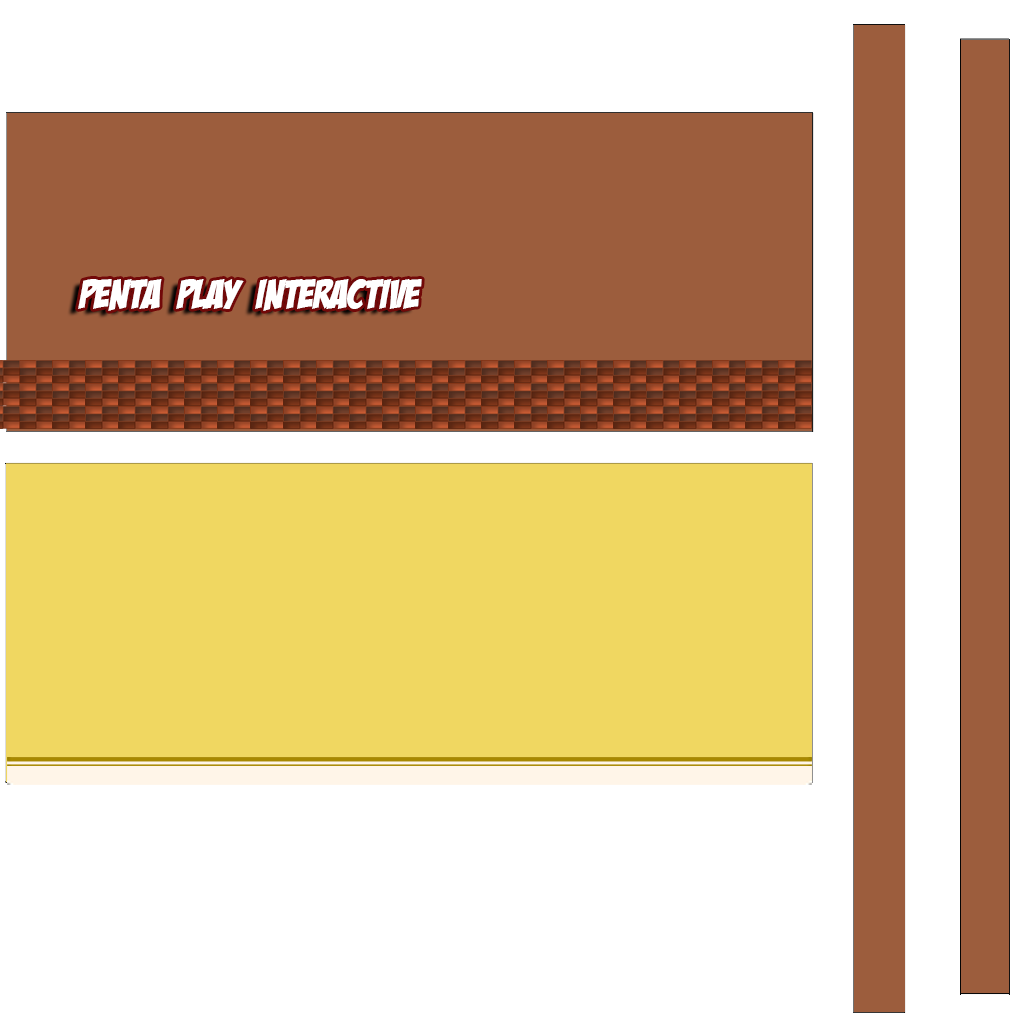
<style>
.page{position:relative;width:1024px;height:1024px;background:#ffffff}
.page>*{position:absolute;margin:0}
.t1{font:41.5px "BadaBoomBB";color:#ffffff}
</style>
<div class="page">
<p class="t1" style="left:78px;top:279px;width:344px;height:32px">Penta  Play  Interactive</p>
</div>
